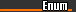
<style>
.page{position:relative;width:76px;height:12px;background:#333333}
.page>*{position:absolute;margin:0}
.t1{font:11px "Impact";color:#ffffff}
</style>
<div class="page">
<p class="t1" style="left:43px;top:1px;width:24px;height:9px">Enum</p>
</div>
